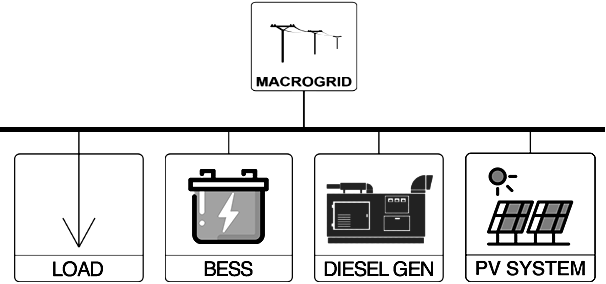
<style>
.page{position:relative;width:606px;height:284px;background:#ffffff}
.page>*{position:absolute;margin:0}
.t1{font:20px "Helvetica";letter-spacing:-0.04em;color:#000000}
</style>
<div class="page">
<p class="t1" style="left:53px;top:261px;width:50px;height:16px">LOAD</p>
<p class="t1" style="left:204px;top:261px;width:49px;height:16px">BESS</p>
<p class="t1" style="left:324px;top:261px;width:109px;height:16px">DIESEL GEN</p>
</div>
